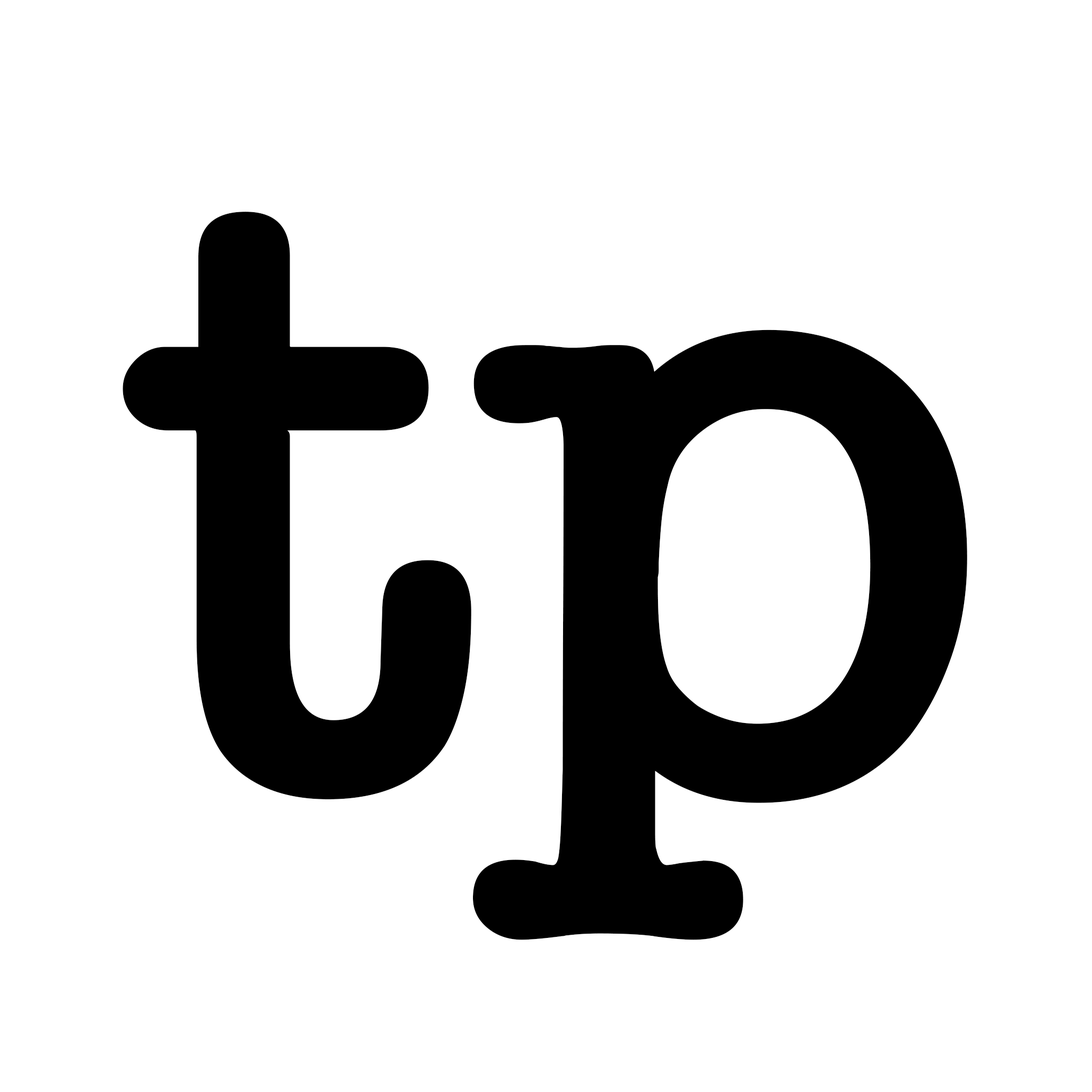
<style>
.page{position:relative;width:1092px;height:1092px;background:#ffffff}
.page>*{position:absolute;margin:0}
.t1{font:888.7px "AmericanTypewriter-Semibold";letter-spacing:-0.01em;color:#000000}
</style>
<div class="page">
<p class="t1" style="left:123px;top:212px;width:844px;height:728px">tp</p>
</div>
